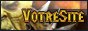
<style>
.page{position:relative;width:88px;height:31px}
.page>*{position:absolute;margin:0}
.t1{font:18px "LifeCraft"}
</style>
<div class="page">
<p class="t1" style="left:22px;top:9px;width:62px;height:14px">VotreSite</p>
</div>
